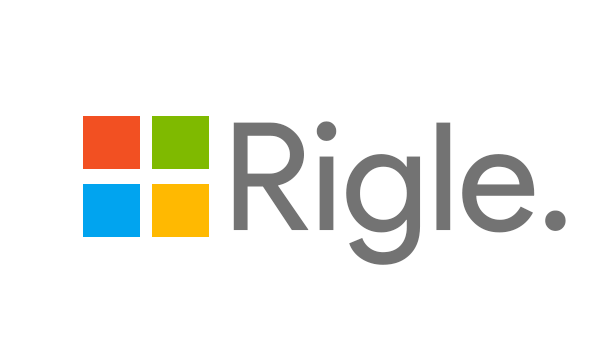
<style>
.page{position:relative;width:603px;height:355px;background:#ffffff}
.page>*{position:absolute;margin:0}
.t1{font:150px "ProductSans-Regular";color:#737373}
</style>
<div class="page">
<p class="t1" style="left:233px;top:121px;width:333px;height:144px">Rigle.</p>
</div>
